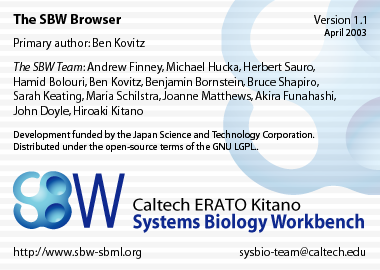
<style>
.page{position:relative;width:380px;height:270px;background:#f5f5f5}
.page>*{position:absolute;margin:0}
.t1{font:14px "Myriad-Bold";color:#000000}
.t2{font:12px "Myriad-Roman";color:#000000}
.t3{font:10px "Myriad-Roman";color:#000000}
.t4{font:12px "Myriad-Italic";color:#000000}
</style>
<div class="page">
<p class="t1" style="left:13px;top:14px;width:108px;height:10px">The SBW Browser</p>
<p class="t2" style="left:314px;top:15px;width:52px;height:9px">Version 1.1</p>
<p class="t3" style="left:324px;top:28px;width:42px;height:10px">April 2003</p>
<p class="t2" style="left:14px;top:38px;width:131px;height:12px">Primary author: Ben Kovitz</p>
<p class="t2" style="left:13px;top:62px;width:323px;height:56px"><span class="t4">The SBW Team</span>: Andrew Finney, Michael Hucka, Herbert Sauro,<br>Hamid Bolouri, Ben Kovitz, Benjamin Bornstein, Bruce Shapiro,<br>Sarah Keating, Maria Schilstra, Joanne Matthews, Akira Funahashi,<br>John Doyle, Hiroaki Kitano</p>
<p class="t3" style="left:14px;top:130px;width:301px;height:22px">Development funded by the Japan Science and Technology Corporation.<br>Distributed under the open-source terms of the GNU LGPL..</p>
<p class="t2" style="left:14px;top:247px;width:127px;height:12px">http://www.sbw-sbml.org</p>
<p class="t2" style="left:239px;top:247px;width:126px;height:12px">sysbio-team@caltech.edu</p>
</div>
